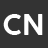
<style>
.page{position:relative;width:48px;height:48px;background:#333333}
.page>*{position:absolute;margin:0}
.t1{font:28px "CocoGothic-Bold";color:#ffffff}
</style>
<div class="page">
<p class="t1" style="left:3px;top:14px;width:40px;height:21px">CN</p>
</div>
